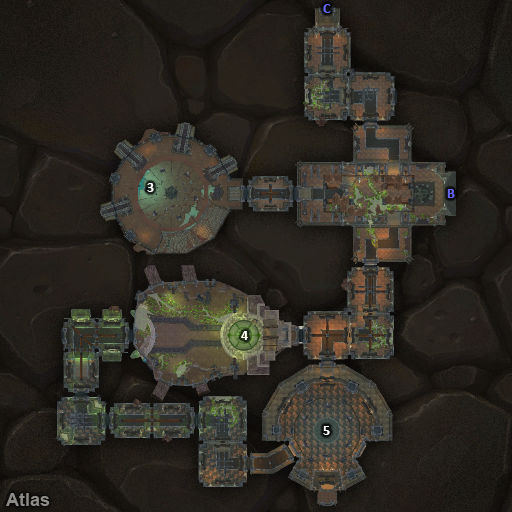
<style>
.page{position:relative;width:512px;height:512px}
.page>*{position:absolute;margin:0}
.t1{font:14px "Calibri-Bold";color:#6666ff}
.t2{font:14px "Calibri-Bold";color:#ffffff}
</style>
<div class="page">
<p class="t1" style="left:323px;top:4px;width:8px;height:9px">C</p>
<p class="t2" style="left:147px;top:183px;width:7px;height:9px">3</p>
<p class="t1" style="left:447px;top:189px;width:8px;height:9px">B</p>
<p class="t2" style="left:241px;top:331px;width:7px;height:9px">4</p>
<p class="t2" style="left:323px;top:426px;width:7px;height:9px">5</p>
</div>
